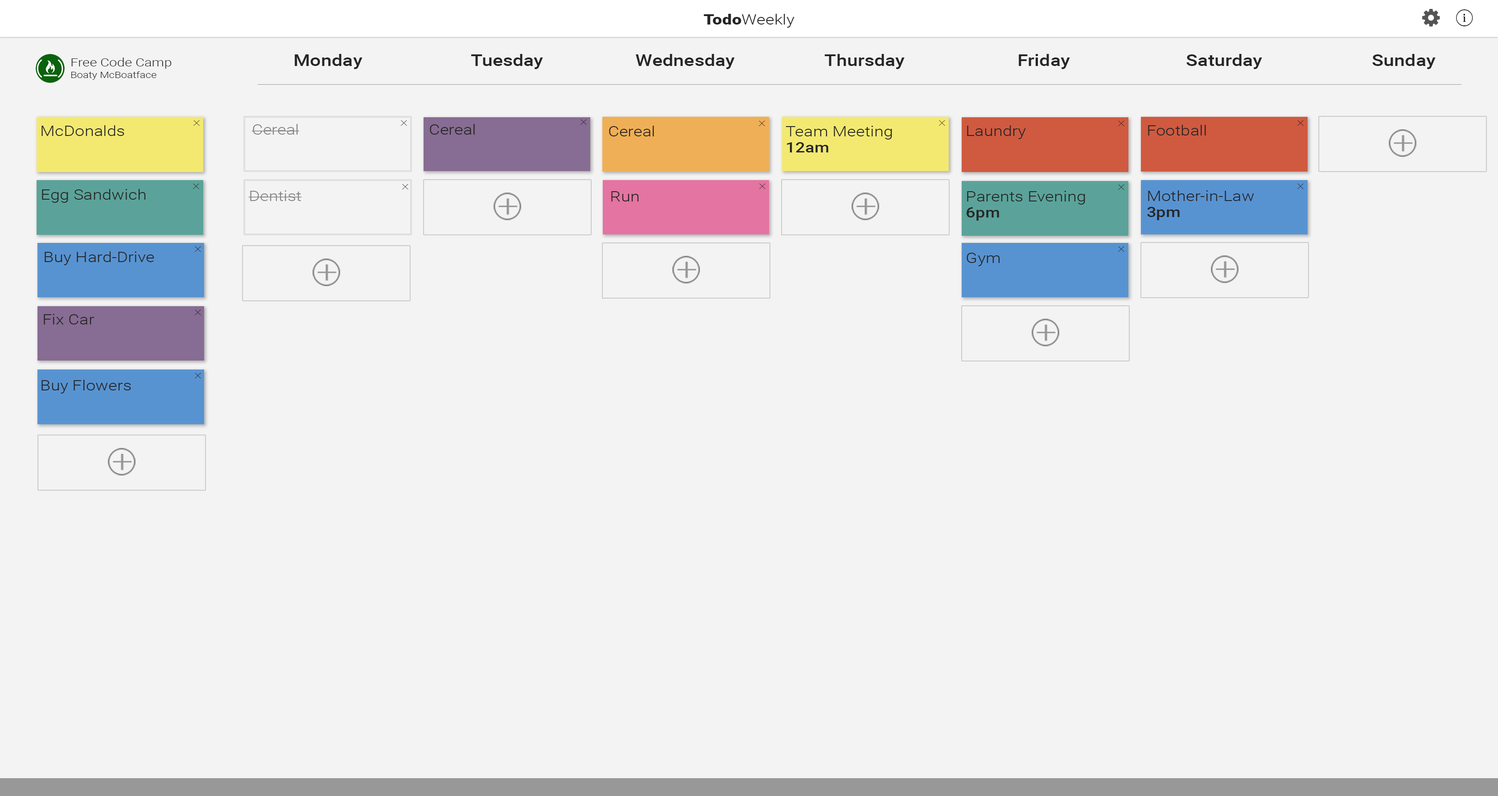
<style>
.page{position:relative;width:1498px;height:796px;background:#f3f3f3}
.page>*{position:absolute;margin:0}
.t1{font:14.3px "Roboto-Light";color:#262626;scale:1.2 1}
.t2{font:14.3px "Roboto-Black";color:#262626;scale:1.2 1}
.t3{font:16px "Roboto-Medium";color:#262626;scale:1.2 1}
.t4{font:8.9px/11.6px "Roboto-Light";color:#262626;scale:1.2 1}
.t5{font:11.6px/11.6px "Roboto-Light";color:#262626;scale:1.2 1}
.t6{font:10.1px "Roboto-Thin";letter-spacing:0.16em;scale:1.45 1}
.t7{font:14.3px "Roboto-Light";color:#858585;scale:1.2 1}
.t8{font:9.9px "Roboto-Thin";letter-spacing:0.16em;color:#1f1f1f;scale:1.47 1}
.t9{font:14.3px/29.4px "Roboto-Light";color:#262626;scale:1.2 1}
.t10{font:14.3px/16px "Roboto-Medium";color:#262626;scale:1.2 1}
.t11{font:14.3px/16px "Roboto-Light";color:#262626;scale:1.2 1}
.t12{font:10.1px "Roboto-Thin";letter-spacing:0.16em;color:#1f1f1f;scale:1.45 1}
</style>
<div class="page">
<p class="t1" style="left:703px;top:14px;width:91px;height:14px"><span class="t2">Todo</span>Weekly</p>
<p class="t3" style="left:295px;top:54px;width:67px;height:15px">Monday</p>
<p class="t3" style="left:471px;top:54px;width:72px;height:15px">Tuesday</p>
<p class="t3" style="left:636px;top:54px;width:99px;height:15px">Wednesday</p>
<p class="t3" style="left:824px;top:54px;width:80px;height:15px">Thursday</p>
<p class="t3" style="left:1019px;top:54px;width:51px;height:15px">Friday</p>
<p class="t3" style="left:1186px;top:54px;width:76px;height:15px">Saturday</p>
<p class="t3" style="left:1372px;top:54px;width:63px;height:15px">Sunday</p>
<p class="t4" style="left:71px;top:58px;width:101px;height:22px"><span class="t5">Free Code Camp<br></span>Boaty McBoatface</p>
<p class="t1" style="left:41px;top:125px;width:83px;height:11px">McDonalds</p>
<p class="t6" style="left:193px;top:120px;width:7px;height:6px">x</p>
<p class="t7" style="left:251px;top:124px;width:48px;height:11px">Cereal</p>
<p class="t6" style="left:400px;top:120px;width:7px;height:6px">x</p>
<p class="t1" style="left:430px;top:124px;width:45px;height:11px">Cereal</p>
<p class="t8" style="left:580px;top:119px;width:7px;height:6px">x</p>
<p class="t1" style="left:609px;top:126px;width:45px;height:10px">Cereal</p>
<p class="t6" style="left:758px;top:121px;width:7px;height:5px">x</p>
<p class="t9" style="left:785px;top:126px;width:107px;height:26px">Team Meeting<br><span class="t10">12am</span></p>
<p class="t6" style="left:938px;top:120px;width:7px;height:6px">x</p>
<p class="t1" style="left:967px;top:125px;width:59px;height:14px">Laundry</p>
<p class="t6" style="left:1118px;top:121px;width:6px;height:5px">x</p>
<p class="t1" style="left:1148px;top:125px;width:58px;height:11px">Football</p>
<p class="t6" style="left:1297px;top:120px;width:6px;height:6px">x</p>
<p class="t6" style="left:193px;top:184px;width:6px;height:5px">x</p>
<p class="t6" style="left:402px;top:184px;width:6px;height:5px">x</p>
<p class="t6" style="left:759px;top:184px;width:6px;height:5px">x</p>
<p class="t6" style="left:1118px;top:185px;width:6px;height:5px">x</p>
<p class="t6" style="left:1297px;top:184px;width:6px;height:5px">x</p>
<p class="t1" style="left:42px;top:189px;width:104px;height:14px">Egg Sandwich</p>
<p class="t7" style="left:248px;top:190px;width:54px;height:11px">Dentist</p>
<p class="t1" style="left:611px;top:191px;width:28px;height:10px">Run</p>
<p class="t11" style="left:966px;top:191px;width:119px;height:30px">Parents Evening<br><span class="t10">6pm</span></p>
<p class="t9" style="left:1147px;top:190px;width:107px;height:30px">Mother-in-Law<br><span class="t10">3pm</span></p>
<p class="t1" style="left:45px;top:251px;width:109px;height:14px">Buy Hard-Drive</p>
<p class="t6" style="left:194px;top:247px;width:7px;height:5px">x</p>
<p class="t1" style="left:966px;top:253px;width:34px;height:13px">Gym</p>
<p class="t6" style="left:1118px;top:247px;width:6px;height:5px">x</p>
<p class="t1" style="left:44px;top:314px;width:51px;height:11px">Fix Car</p>
<p class="t12" style="left:194px;top:310px;width:7px;height:5px">x</p>
<p class="t6" style="left:194px;top:373px;width:7px;height:5px">x</p>
<p class="t1" style="left:41px;top:380px;width:90px;height:14px">Buy Flowers</p>
</div>
